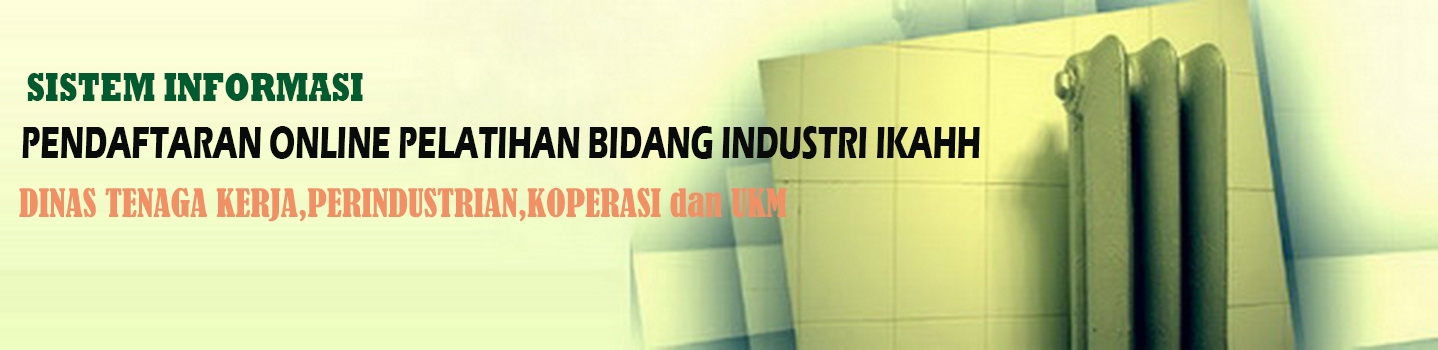
<style>
.page{position:relative;width:1438px;height:350px}
.page>*{position:absolute;margin:0}
.t1{font:40.8px "Rockwell-ExtraBold";color:#025b2e;scale:0.73 1}
.t2{font:47.1px "ErasITC-Bold";color:#090a0a;scale:0.63 1}
.t3{font:36px "BernardMT-Condensed";color:#f19065}
</style>
<div class="page">
<p class="t1" style="left:27px;top:73px;width:336px;height:28px">SISTEM INFORMASI</p>
<p class="t2" style="left:22px;top:126px;width:958px;height:33px">PENDAFTARAN ONLINE PELATIHAN BIDANG INDUSTRI IKAHH</p>
<p class="t3" style="left:19px;top:187px;width:768px;height:35px">DINAS TENAGA KERJA,PERINDUSTRIAN,KOPERASI dan UKM</p>
</div>
